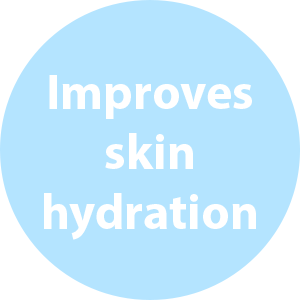
<style>
.page{position:relative;width:300px;height:300px;background:#b4e4ff}
.page>*{position:absolute;margin:0}
.t1{font:50px "MyriadPro-Bold";color:#ffffff}
</style>
<div class="page">
<p class="t1" style="left:44px;top:75px;width:212px;height:165px;text-align:center">Improves skin <br>hydration</p>
</div>
